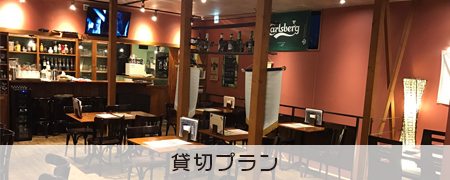
<style>
.page{position:relative;width:450px;height:180px}
.page>*{position:absolute;margin:0}
.t1{font:19.8px "OT-NIS_WKL4";letter-spacing:0.1em;color:#231815}
</style>
<div class="page">
<p class="t1" style="left:171px;top:152px;width:107px;height:20px">貸切プラン</p>
</div>
